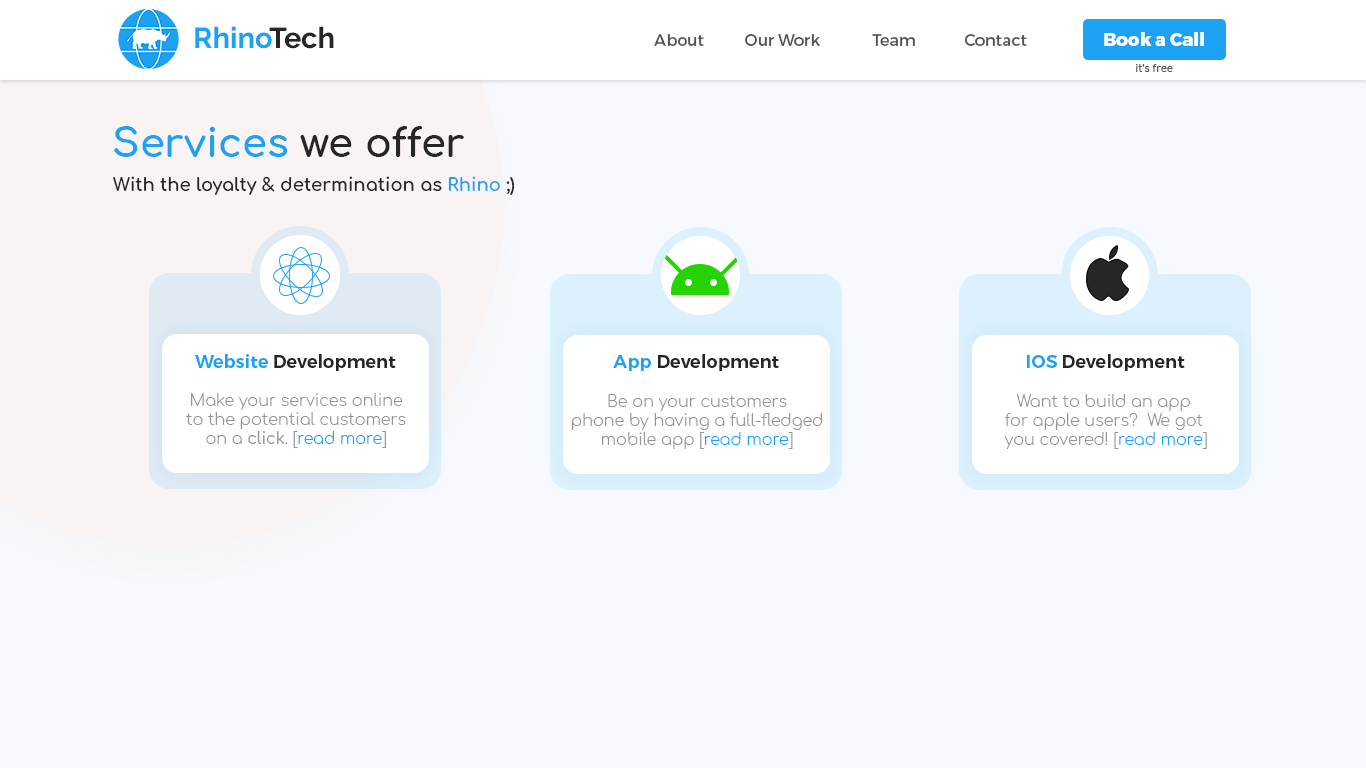
<style>
.page{position:relative;width:1366px;height:768px;background:#f6faff}
.page>*{position:absolute;margin:0}
.t1{font:29px "Raleway-Bold";color:#1da1f2}
.t2{font:29px "Raleway-Bold";color:#262626}
.t3{font:16px "Montserrat-Regular";color:#535353}
.t4{font:18px "Montserrat-ExtraBold";color:#ffffff}
.t5{font:10px "Comfortaa-Bold";color:#535353}
.t6{font:40px "Comfortaa-Bold";color:#1da1f2}
.t7{font:40px "Comfortaa-Bold";color:#262626}
.t8{font:18px "Comfortaa-Bold";color:#262626}
.t9{font:18px "Comfortaa-Bold";color:#1da1f2}
.t10{font:18px "Montserrat-SemiBold";color:#262626}
.t11{font:18px "Montserrat-SemiBold";color:#1da1f2}
.t12{font:16px "Comfortaa-Light";color:#969696}
.t13{font:16px "Comfortaa-Medium";color:#969696}
.t14{font:16px "Comfortaa-Light";color:#1da1f2}
</style>
<div class="page">
<p class="t1" style="left:195px;top:26px;width:139px;height:23px">Rhino<span class="t2">Tech</span></p>
<p class="t3" style="left:654px;top:34px;width:50px;height:12px">About</p>
<p class="t3" style="left:745px;top:34px;width:75px;height:12px">Our Work</p>
<p class="t3" style="left:872px;top:34px;width:43px;height:12px">Team</p>
<p class="t3" style="left:964px;top:34px;width:63px;height:12px">Contact</p>
<p class="t4" style="left:1104px;top:32px;width:100px;height:14px">Book a Call</p>
<p class="t5" style="left:1136px;top:64px;width:37px;height:8px">it’s free</p>
<p class="t6" style="left:114px;top:126px;width:350px;height:31px">Services<span class="t7"> we offer</span></p>
<p class="t8" style="left:113px;top:176px;width:402px;height:19px">With the loyalty &amp; determination as <span class="t9">Rhino</span> ;)</p>
<p class="t10" style="left:195px;top:354px;width:201px;height:17px"><span class="t11">Website </span>Development</p>
<p class="t10" style="left:613px;top:354px;width:166px;height:17px"><span class="t11">App </span>Development</p>
<p class="t10" style="left:1027px;top:354px;width:158px;height:17px"><span class="t11">IOS </span>Development</p>
<p class="t12" style="left:186px;top:393px;width:220px;height:55px;text-align:center">Make your services online<br>to the potential customers<br>on a <span class="t13">click</span>. [<span class="t14">read more</span>]</p>
<p class="t12" style="left:572px;top:394px;width:250px;height:55px;text-align:center">Be on your customers<br>phone by having a full-fledged<br>mobile app [<span class="t14">read more</span>]</p>
<p class="t12" style="left:1004px;top:394px;width:203px;height:55px;text-align:center">Want to build an app <br>for apple users?  We got <br>you covered! [<span class="t14">read more</span>]</p>
</div>
